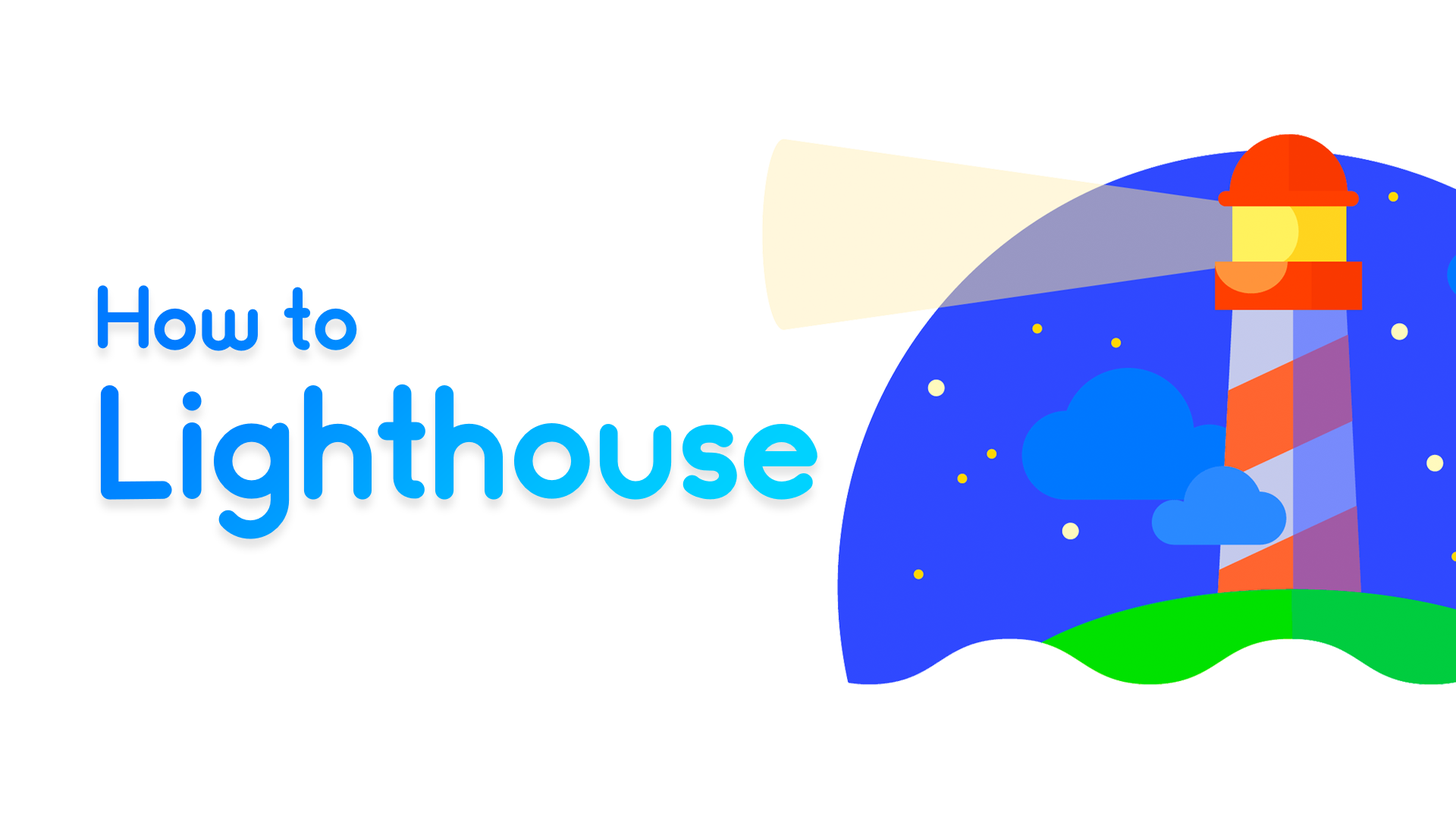
<style>
.page{position:relative;width:1456px;height:819px;background:#ffffff}
.page>*{position:absolute;margin:0}
.t1{font:150.4px/91px "Somatic-Rounded"}
.t2{font:83px/91px "Somatic-Rounded"}
</style>
<div class="page">
<p class="t1" style="left:97px;top:285px;width:720px;height:254px"><span class="t2">How to<br></span>Lighthouse</p>
</div>
